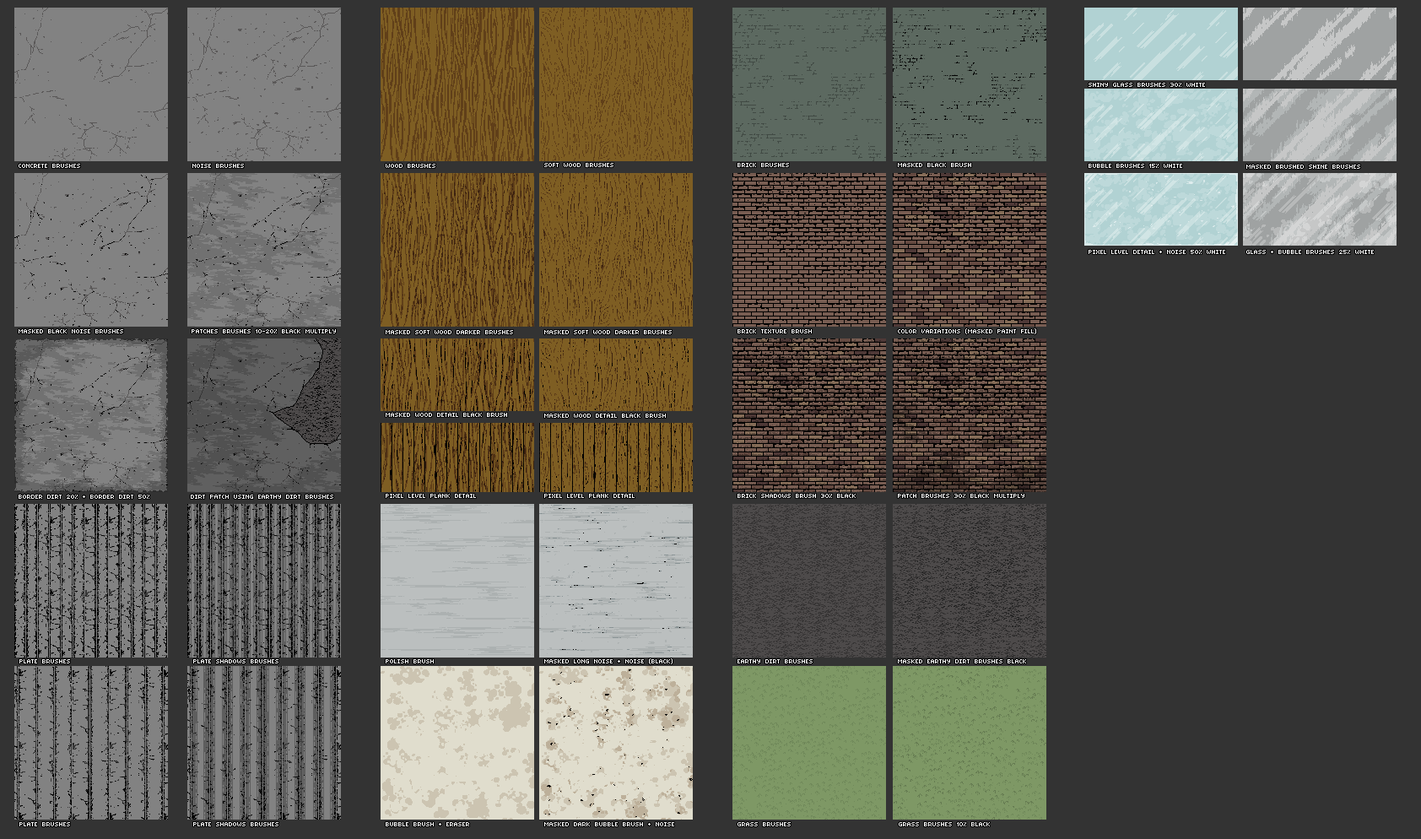
<style>
.page{position:relative;width:1421px;height:839px;background:#333333}
.page>*{position:absolute;margin:0}
.t1{font:13.5px "TinyUnicode";color:#ffffff}
</style>
<div class="page">
<p class="t1" style="left:1089px;top:83px;width:116px;height:4px">SHINY GLASS BRUSHES 30% WHITE</p>
<p class="t1" style="left:19px;top:164px;width:61px;height:4px">CONCRETE BRUSHES</p>
<p class="t1" style="left:192px;top:164px;width:52px;height:4px">NOISE BRUSHES</p>
<p class="t1" style="left:386px;top:164px;width:50px;height:4px">WOOD BRUSHES</p>
<p class="t1" style="left:544px;top:163px;width:70px;height:4px">SOFT WOOD BRUSHES</p>
<p class="t1" style="left:738px;top:163px;width:51px;height:4px">BRICK BRUSHES</p>
<p class="t1" style="left:898px;top:163px;width:73px;height:4px">MASKED BLACK BRUSH</p>
<p class="t1" style="left:1089px;top:164px;width:93px;height:4px">BUBBLE BRUSHES 15% WHITE</p>
<p class="t1" style="left:1247px;top:165px;width:114px;height:4px">MASKED BRUSHED SHINE BRUSHES</p>
<p class="t1" style="left:1089px;top:250px;width:137px;height:4px">PIXEL LEVEL DETAIL + NOISE 50% WHITE</p>
<p class="t1" style="left:1247px;top:250px;width:127px;height:4px">GLASS + BUBBLE BRUSHES 25% WHITE</p>
<p class="t1" style="left:19px;top:329px;width:104px;height:4px">MASKED BLACK NOISE BRUSHES</p>
<p class="t1" style="left:192px;top:329px;width:144px;height:4px">PATCHES BRUSHES 10-20% BLACK MULTIPLY</p>
<p class="t1" style="left:738px;top:329px;width:74px;height:4px">BRICK TEXTURE BRUSH</p>
<p class="t1" style="left:898px;top:328px;width:138px;height:6px">COLOR VARIATIONS (MASKED PAINT FILL)</p>
<p class="t1" style="left:386px;top:330px;width:127px;height:4px">MASKED SOFT WOOD DARKER BRUSHES</p>
<p class="t1" style="left:544px;top:330px;width:128px;height:4px">MASKED SOFT WOOD DARKER BRUSHES</p>
<p class="t1" style="left:386px;top:413px;width:121px;height:4px">MASKED WOOD DETAIL BLACK BRUSH</p>
<p class="t1" style="left:544px;top:414px;width:122px;height:4px">MASKED WOOD DETAIL BLACK BRUSH</p>
<p class="t1" style="left:19px;top:495px;width:130px;height:4px">BORDER DIRT 20% + BORDER DIRT 50%</p>
<p class="t1" style="left:191px;top:495px;width:142px;height:4px">DIRT PATCH USING EARTHY DIRT BRUSHES</p>
<p class="t1" style="left:386px;top:494px;width:90px;height:4px">PIXEL LEVEL PLANK DETAIL</p>
<p class="t1" style="left:544px;top:494px;width:91px;height:4px">PIXEL LEVEL PLANK DETAIL</p>
<p class="t1" style="left:738px;top:494px;width:118px;height:4px">BRICK SHADOWS BRUSH 30% BLACK</p>
<p class="t1" style="left:898px;top:494px;width:127px;height:4px">PATCH BRUSHES 30% BLACK MULTIPLY</p>
<p class="t1" style="left:19px;top:659px;width:51px;height:4px">PLATE BRUSHES</p>
<p class="t1" style="left:193px;top:659px;width:86px;height:4px">PLATE SHADOWS BRUSHES</p>
<p class="t1" style="left:386px;top:659px;width:48px;height:4px">POLISH BRUSH</p>
<p class="t1" style="left:544px;top:658px;width:129px;height:6px">MASKED LONG NOISE + NOISE (BLACK)</p>
<p class="t1" style="left:738px;top:659px;width:75px;height:4px">EARTHY DIRT BRUSHES</p>
<p class="t1" style="left:898px;top:659px;width:128px;height:4px">MASKED EARTHY DIRT BRUSHES BLACK</p>
<p class="t1" style="left:19px;top:822px;width:51px;height:4px">PLATE BRUSHES</p>
<p class="t1" style="left:193px;top:822px;width:86px;height:4px">PLATE SHADOWS BRUSHES</p>
<p class="t1" style="left:386px;top:822px;width:83px;height:4px">BUBBLE BRUSH + ERASER</p>
<p class="t1" style="left:544px;top:822px;width:130px;height:4px">MASKED DARK BUBBLE BRUSH + NOISE</p>
<p class="t1" style="left:738px;top:822px;width:53px;height:4px">GRASS BRUSHES</p>
<p class="t1" style="left:899px;top:822px;width:91px;height:4px">GRASS BRUSHES 10% BLACK</p>
</div>
